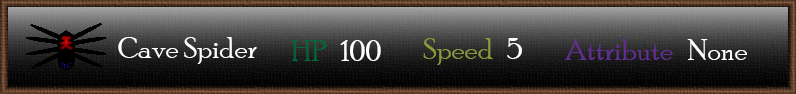
<style>
.page{position:relative;width:796px;height:94px}
.page>*{position:absolute;margin:0}
.t1{font:30px "PoorRichard-Regular";color:#ffffff}
.t2{font:30px "PoorRichard-Regular";color:#006738}
.t3{font:30px "PoorRichard-Regular";color:#8c9839}
.t4{font:30px "PoorRichard-Regular";color:#622d91}
</style>
<div class="page">
<p class="t1" style="left:118px;top:37px;width:139px;height:27px">Cave Spider</p>
<p class="t1" style="left:291px;top:40px;width:90px;height:21px"><span class="t2">HP</span>   100</p>
<p class="t3" style="left:423px;top:38px;width:99px;height:27px">Speed   <span class="t1">5</span></p>
<p class="t4" style="left:564px;top:39px;width:183px;height:21px">Attribute   <span class="t1">None</span></p>
</div>
